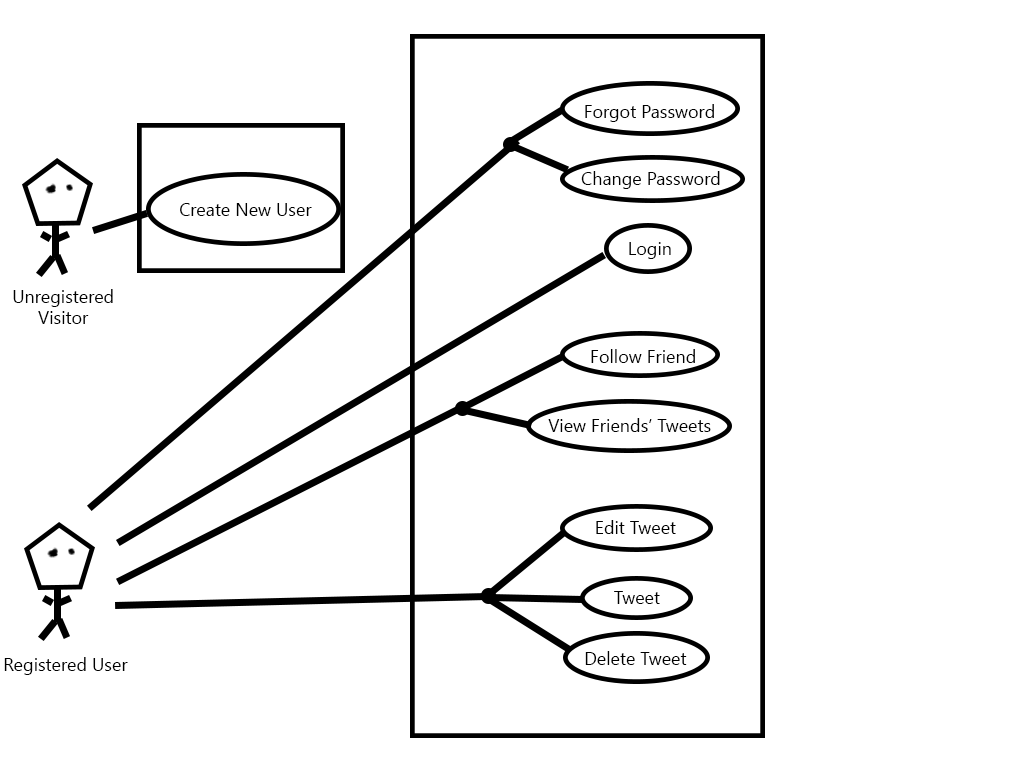
<style>
.page{position:relative;width:1024px;height:768px;background:#ffffff}
.page>*{position:absolute;margin:0}
.t1{font:18px "SegoeUISymbol";color:#000000}
</style>
<div class="page">
<p class="t1" style="left:585px;top:104px;width:129px;height:18px">Forgot Password</p>
<p class="t1" style="left:581px;top:171px;width:139px;height:18px">Change Password</p>
<p class="t1" style="left:180px;top:203px;width:132px;height:13px">Create New User</p>
<p class="t1" style="left:629px;top:242px;width:42px;height:17px">Login</p>
<p class="t1" style="left:13px;top:289px;width:100px;height:35px;text-align:center">Unregistered Visitor</p>
<p class="t1" style="left:591px;top:349px;width:104px;height:14px">Follow Friend</p>
<p class="t1" style="left:548px;top:418px;width:163px;height:14px">View Friends’ Tweets</p>
<p class="t1" style="left:596px;top:520px;width:80px;height:14px">Edit Tweet</p>
<p class="t1" style="left:614px;top:591px;width:46px;height:13px">Tweet</p>
<p class="t1" style="left:585px;top:651px;width:102px;height:14px">Delete Tweet</p>
<p class="t1" style="left:4px;top:657px;width:124px;height:18px">Registered User</p>
</div>
